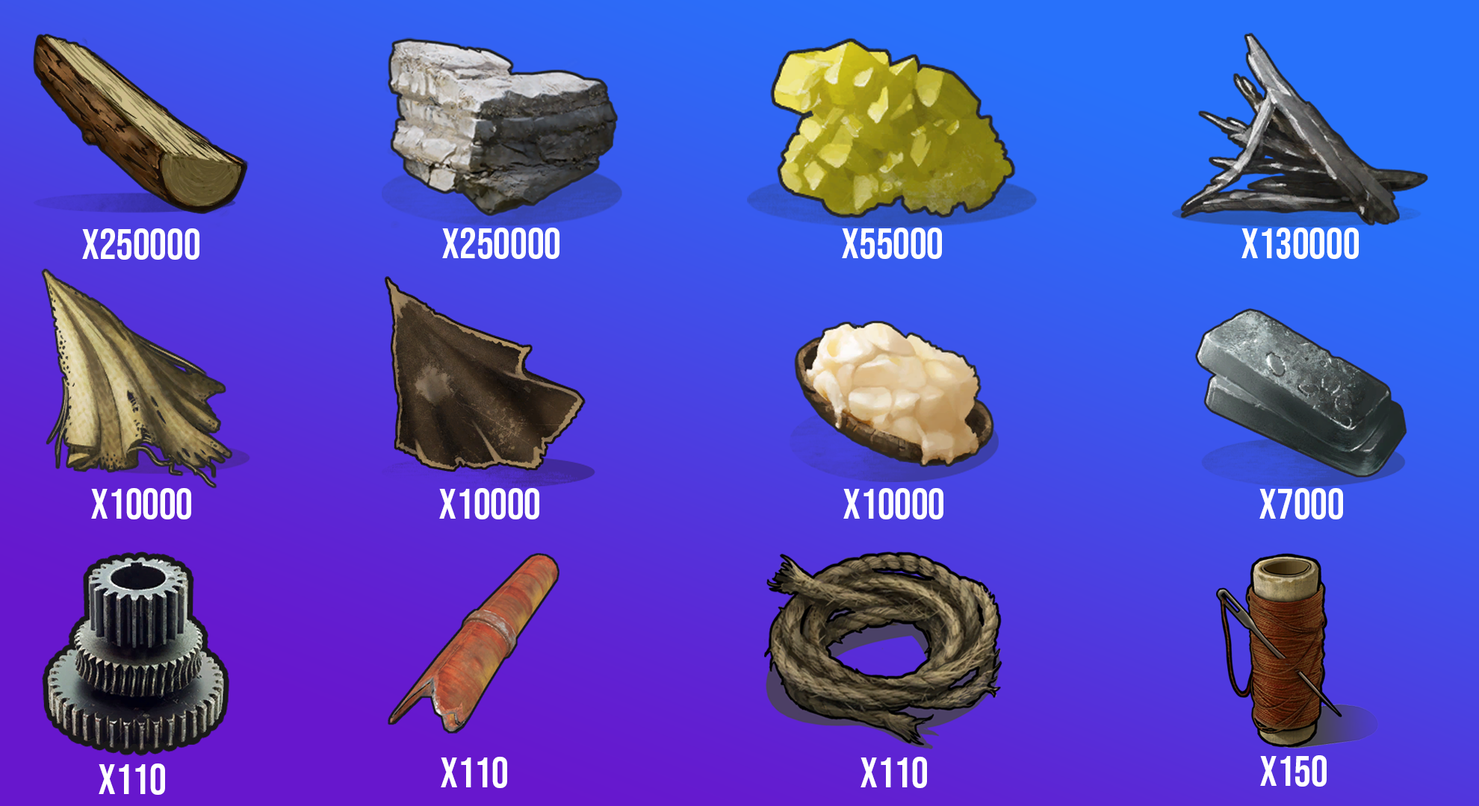
<style>
.page{position:relative;width:1479px;height:806px}
.page>*{position:absolute;margin:0}
.t1{font:42.2px "BebasNeue-Regular";color:#ffffff}
.t2{font:42.2px "BebasNeue-Regular";color:#fefefe}
</style>
<div class="page">
<p class="t1" style="left:82px;top:229px;width:117px;height:31px">x250000</p>
<p class="t1" style="left:442px;top:228px;width:117px;height:31px">x250000</p>
<p class="t1" style="left:842px;top:228px;width:100px;height:31px">x55000</p>
<p class="t2" style="left:1241px;top:228px;width:117px;height:31px">x130000</p>
<p class="t1" style="left:91px;top:488px;width:100px;height:32px">x10000</p>
<p class="t1" style="left:439px;top:488px;width:100px;height:32px">x10000</p>
<p class="t1" style="left:843px;top:488px;width:100px;height:32px">x10000</p>
<p class="t1" style="left:1259px;top:488px;width:84px;height:32px">x7000</p>
<p class="t1" style="left:441px;top:757px;width:66px;height:32px">x110</p>
<p class="t1" style="left:860px;top:757px;width:67px;height:32px">x110</p>
<p class="t1" style="left:1260px;top:756px;width:66px;height:31px">x150</p>
<p class="t1" style="left:99px;top:764px;width:66px;height:31px">x110</p>
</div>
